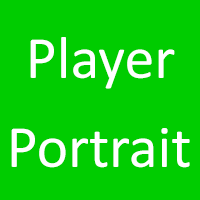
<style>
.page{position:relative;width:200px;height:200px;background:#00cc00}
.page>*{position:absolute;margin:0}
.t1{font:60px "Calibri";color:#ffffff}
</style>
<div class="page">
<p class="t1" style="left:30px;top:37px;width:145px;height:52px">Player</p>
<p class="t1" style="left:11px;top:128px;width:179px;height:40px">Portrait</p>
</div>
